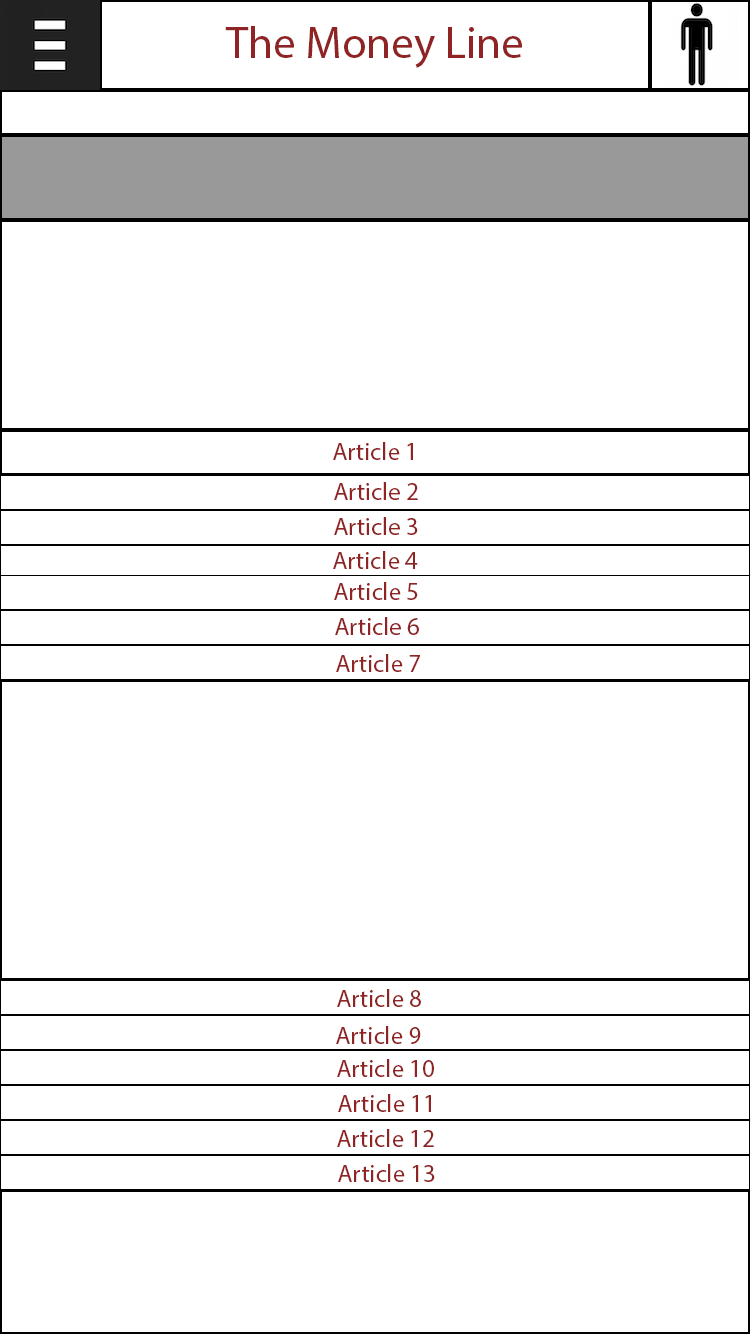
<style>
.page{position:relative;width:750px;height:1334px;background:#ffffff}
.page>*{position:absolute;margin:0}
.t1{font:45px "MyriadPro-Regular";color:#902424}
.t2{font:25px "MyriadPro-Regular";color:#902424}
</style>
<div class="page">
<p class="t1" style="left:225px;top:26px;width:297px;height:42px">The Money Line</p>
<p class="t2" style="left:333px;top:442px;width:80px;height:18px">Article 1</p>
<p class="t2" style="left:334px;top:482px;width:84px;height:18px">Article 2</p>
<p class="t2" style="left:334px;top:517px;width:84px;height:18px">Article 3</p>
<p class="t2" style="left:333px;top:551px;width:85px;height:18px">Article 4</p>
<p class="t2" style="left:334px;top:582px;width:84px;height:18px">Article 5</p>
<p class="t2" style="left:335px;top:617px;width:84px;height:18px">Article 6</p>
<p class="t2" style="left:336px;top:654px;width:84px;height:18px">Article 7</p>
<p class="t2" style="left:337px;top:989px;width:84px;height:18px">Article 8</p>
<p class="t2" style="left:336px;top:1026px;width:85px;height:18px">Article 9</p>
<p class="t2" style="left:337px;top:1059px;width:97px;height:18px">Article 10</p>
<p class="t2" style="left:338px;top:1094px;width:93px;height:18px">Article 11</p>
<p class="t2" style="left:337px;top:1129px;width:97px;height:18px">Article 12</p>
<p class="t2" style="left:338px;top:1164px;width:97px;height:18px">Article 13</p>
</div>
